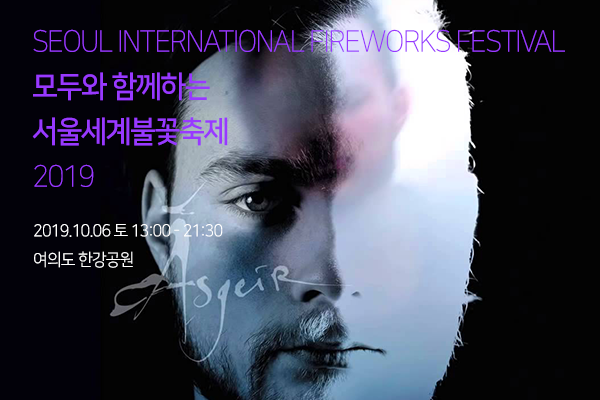
<style>
.page{position:relative;width:600px;height:400px;background:#030303}
.page>*{position:absolute;margin:0}
.t1{font:30px/45px "NanumSquareOTFL";letter-spacing:-0.05em;color:#9839ff;scale:0.95 1}
.t2{font:30px/45px "NanumSquareOTFB";letter-spacing:-0.05em;color:#9839ff;scale:0.95 1}
.t3{font:17px/29px "NanumSquareOTFR";letter-spacing:-0.05em;color:#ffffff;scale:0.95 1}
</style>
<div class="page">
<p class="t1" style="left:32px;top:29px;width:533px;height:158px">SEOUL INTERNATIONAL FIREWORKS FESTIVAL <br><span class="t2">모두와 함께하는<br>서울세계불꽃축제<br></span>2019</p>
<p class="t3" style="left:34px;top:224px;width:189px;height:44px">2019.10.06 토 13:00 - 21:30<br>여의도 한강공원</p>
</div>
